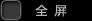
<style>
.page{position:relative;width:92px;height:21px;background:#000000}
.page>*{position:absolute;margin:0}
.t1{font:12px "MicrosoftYaHei";color:#b4b4b4}
</style>
<div class="page">
<p class="t1" style="left:35px;top:4px;width:32px;height:13px">全  屏</p>
</div>
